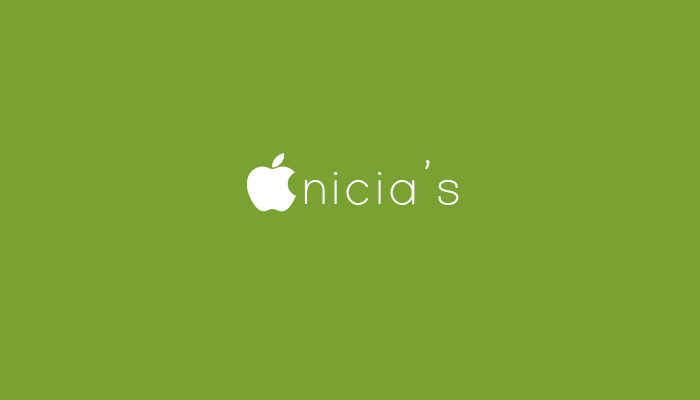
<style>
.page{position:relative;width:700px;height:400px;background:#7aa233}
.page>*{position:absolute;margin:0}
.t1{font:72px "C39HrP36DlTt";color:#ffffff}
.t2{font:72px "PrintClearly";color:#ffffff}
</style>
<div class="page">
<p class="t1" style="left:246px;top:153px;width:50px;height:59px">Ġ</p>
<p class="t2" style="left:304px;top:160px;width:155px;height:45px">nicia’s</p>
</div>
